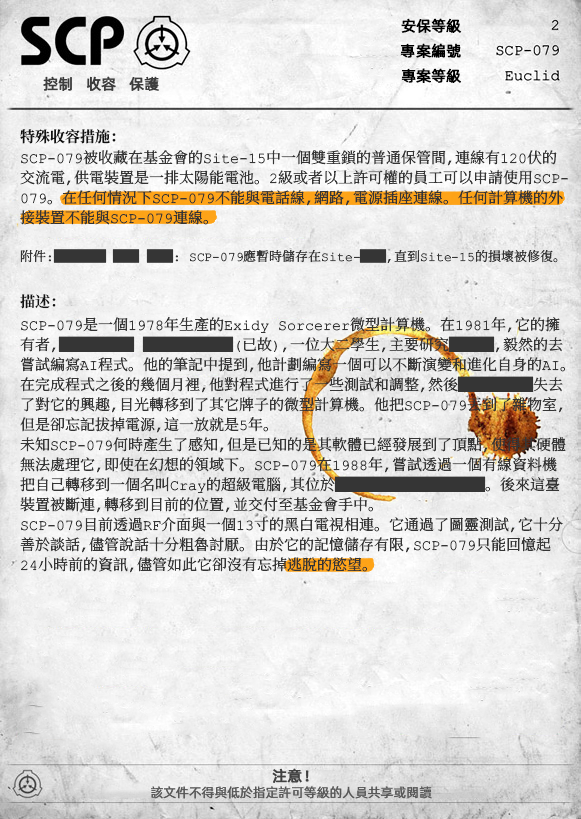
<style>
.page{position:relative;width:581px;height:819px}
.page>*{position:absolute;margin:0}
.t1{font:15px "AlibabaPuHuiTiR";color:#000000;font-weight:bold}
.t2{font:15px "AlibabaPuHuiTiR";color:#3d3d3d;font-weight:bold}
.t3{font:15px "ContainmentBreach-Bold";color:#121212}
.t4{font:15px/20px "ContainmentBreach-Regular";color:#353535}
.t5{font:13px/20px "ContainmentBreach-Regular";color:#353535}
.t6{font:15px "AlibabaPuHuiTiR";color:#414141;font-weight:bold}
.t7{font:13px "AlibabaPuHuiTiR";color:#575757}
</style>
<div class="page">
<p class="t1" style="left:401px;top:18px;width:60px;height:15px">安保等級</p>
<p class="t1" style="left:400px;top:43px;width:61px;height:15px">專案編號</p>
<p class="t2" style="left:43px;top:76px;width:116px;height:15px">控制   收容   保護</p>
<p class="t1" style="left:401px;top:68px;width:60px;height:15px">專案等級</p>
<p class="t3" style="left:20px;top:129px;width:96px;height:15px">特殊收容措施：</p>
<p class="t4" style="left:20px;top:150px;width:548px;height:113px">SCP-079被收藏在基金會的Site-15中一個雙重鎖的普通保管間，連線有120伏的<br>交流電，供電裝置是一排太陽能電池。2級或者以上許可權的員工可以申請使用SCP-<br>079。在任何情況下SCP-079不能與電話線，網路，電源插座連線。任何計算機的外<br>接裝置不能與SCP-079連線。<br><br><span class="t5">附件：████ ██ ██： SCP-079應暫時儲存在Site-██，直到Site-15的損壞被修復。</span></p>
<p class="t3" style="left:20px;top:294px;width:36px;height:15px">描述：</p>
<p class="t4" style="left:20px;top:317px;width:546px;height:256px">SCP-079是一個1978年生產的Exidy Sorcerer微型計算機。在1981年，它的擁<br>有者，█████ ██████（已故），一位大二學生，主要研究███，毅然的去<br>嘗試編寫AI程式。他的筆記中提到，他計劃編寫一個可以不斷演變和進化自身的AI。<br>在完成程式之後的幾個月裡，他對程式進行了一些測試和調整，然後█████失去<br>了對它的興趣，目光轉移到了其它牌子的微型計算機。他把SCP-079丟到了雜物室，<br>但是卻忘記拔掉電源，這一放就是5年。<br>未知SCP-079何時產生了感知，但是已知的是其軟體已經發展到了頂點，使得其硬體<br>無法處理它，即使在幻想的領域下。SCP-079在1988年，嘗試透過一個有線資料機<br>把自己轉移到一個名叫Cray的超級電腦，其位於██████████。後來這臺<br>裝置被斷連，轉移到目前的位置，並交付至基金會手中。<br>SCP-079目前透過RF介面與一個13寸的黑白電視相連。它通過了圖靈測試，它十分<br>善於談話，儘管說話十分粗魯討厭。由於它的記憶儲存有限，SCP-079只能回憶起<br>24小時前的資訊，儘管如此它卻沒有忘掉逃脫的慾望。</p>
<p class="t6" style="left:272px;top:768px;width:37px;height:15px">注意！</p>
<p class="t7" style="left:151px;top:786px;width:281px;height:13px">該文件不得與低於指定許可等級的人員共享或閱讀</p>
</div>
